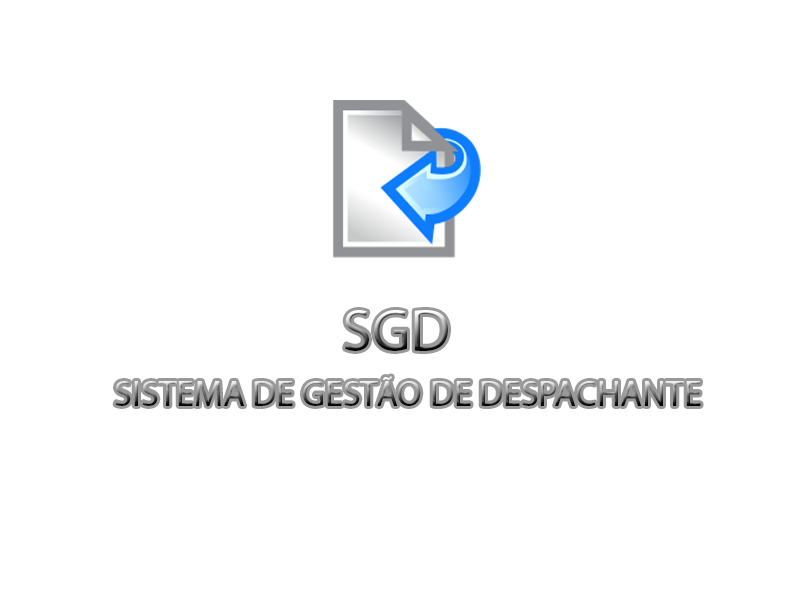
<style>
.page{position:relative;width:800px;height:600px;background:#ffffff}
.page>*{position:absolute;margin:0}
.t1{font:60px "MyriadPro-Regular"}
.t2{font:36px "MyriadPro-Regular"}
</style>
<div class="page">
<p class="t1" style="left:345px;top:310px;width:103px;height:41px">SGD</p>
<p class="t2" style="left:115px;top:376px;width:586px;height:30px">SISTEMA DE GESTÃO DE DESPACHANTE</p>
</div>
